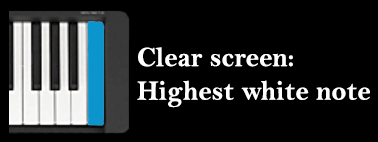
<style>
.page{position:relative;width:378px;height:142px;background:#000000}
.page>*{position:absolute;margin:0}
.t1{font:28px "BellMTBold";color:#ffffff}
</style>
<div class="page">
<p class="t1" style="left:137px;top:47px;width:233px;height:61px">Clear screen:<br>Highest white note</p>
</div>
